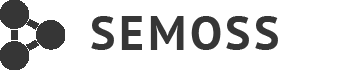
<style>
.page{position:relative;width:359px;height:70px;background:#ffffff}
.page>*{position:absolute;margin:0}
.t1{font:48px "PTSans-Bold";color:#363636}
</style>
<div class="page">
<p class="t1" style="left:91px;top:16px;width:187px;height:34px">S E M  O S S</p>
</div>
